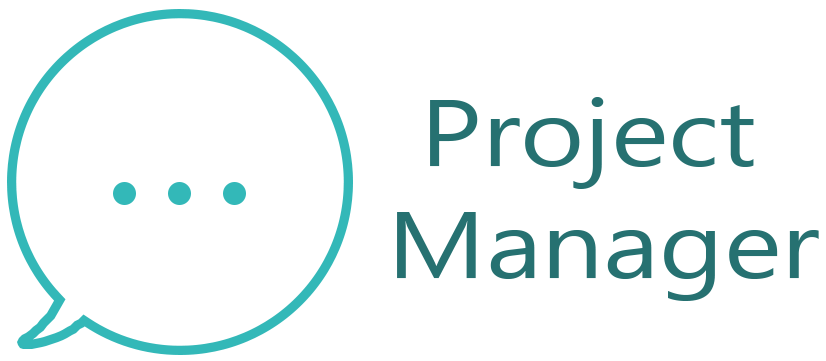
<style>
.page{position:relative;width:826px;height:361px;background:#ffffff}
.page>*{position:absolute;margin:0}
.t1{font:93.6px "Gadugi";color:#267171;scale:1.17 1}
</style>
<div class="page">
<p class="t1" style="left:397px;top:97px;width:422px;height:204px;text-align:center">Project <br>Manager</p>
</div>
